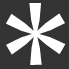
<style>
.page{position:relative;width:69px;height:69px;background:#333333}
.page>*{position:absolute;margin:0}
.t1{font:120px "Merriweather-Regular";color:#ffffff}
</style>
<div class="page">
<p class="t1" style="left:6px;top:3px;width:60px;height:62px">*</p>
</div>
